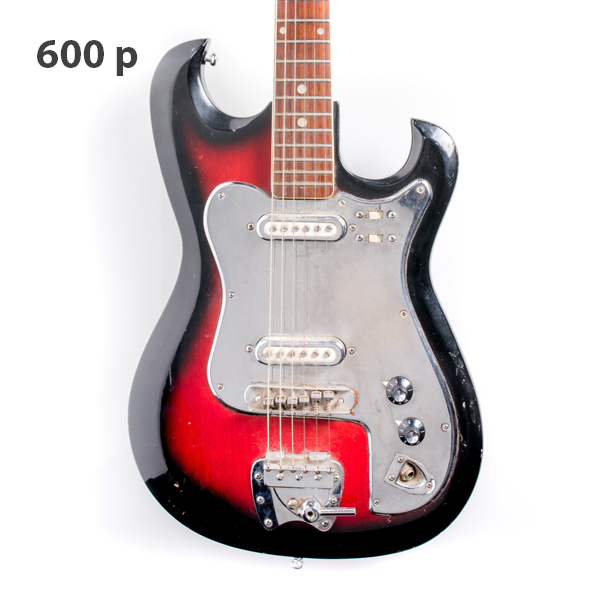
<style>
.page{position:relative;width:600px;height:600px;background:#ffffff}
.page>*{position:absolute;margin:0}
.t1{font:41.7px "MyriadPro-Bold";color:#404040}
</style>
<div class="page">
<p class="t1" style="left:37px;top:40px;width:101px;height:36px">600 p</p>
</div>
